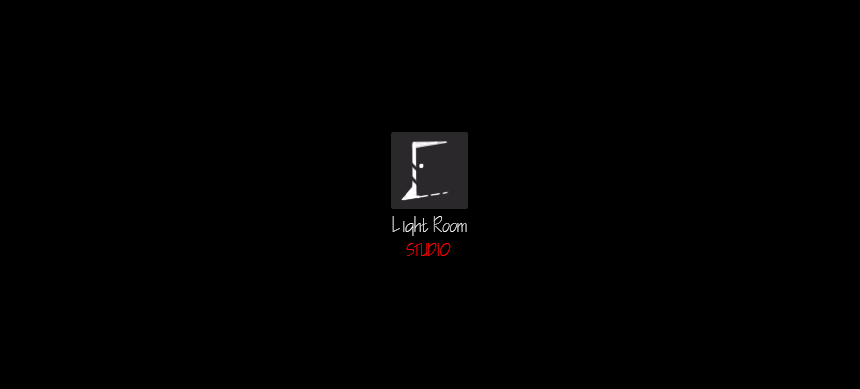
<style>
.page{position:relative;width:860px;height:389px;background:#000000}
.page>*{position:absolute;margin:0}
.t1{font:19.7px "CityBlueprint";color:#f5f5f5}
.t2{font:16px "CityBlueprint";color:#ff0000}
</style>
<div class="page">
<p class="t1" style="left:392px;top:216px;width:75px;height:20px">Light Room</p>
<p class="t2" style="left:406px;top:243px;width:45px;height:13px">STUDIO</p>
</div>
